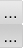
<style>
.page{position:relative;width:23px;height:48px}
.page>*{position:absolute;margin:0}
.t1{font:13px "Verdana";color:#000000;text-transform:uppercase}
</style>
<div class="page">
<p class="t1" style="left:5px;top:16px;width:11px;height:2px">...</p>
<p class="t1" style="left:5px;top:40px;width:11px;height:2px">...</p>
</div>
